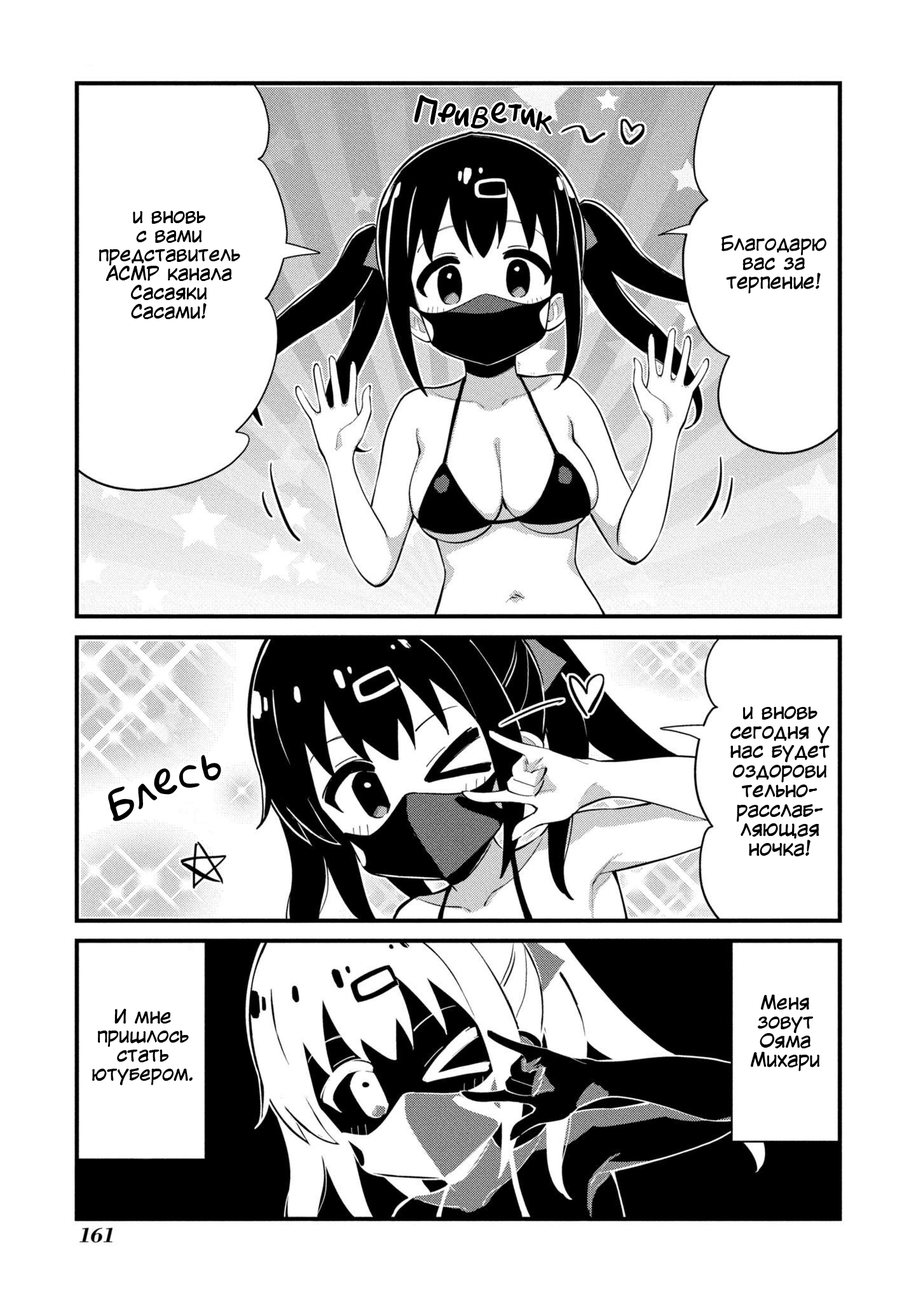
<style>
.page{position:relative;width:916px;height:1302px;background:#ffffff}
.page>*{position:absolute;margin:0}
.t1{font:30.5px "AkbarPlain";color:#000000}
.t2{font:19.1px/19.1px "KuraiVoice2";color:#000000}
.t3{font:19.2px/19.1px "KuraiVoice2";color:#000000}
.t4{font:19.2px "KuraiVoice2";color:#000000}
.t5{font:19.5px/19.5px "KuraiVoice2";color:#000000}
.t6{font:38.1px "AkbarPlain";color:#000000;scale:1.09 1}
</style>
<div class="page">
<p class="t1" style="left:414px;top:95px;width:138px;height:39px;rotate:6deg">Приветик</p>
<p class="t2" style="left:99px;top:210px;width:141px;height:109px;text-align:center">и вновь<br>с вами<br>представитель АСМР канала Сасаяки Сасами!</p>
<p class="t3" style="left:721px;top:235px;width:105px;height:59px;text-align:center"><span class="t4"> </span>Благодарю вас за терпение!</p>
<p class="t5" style="left:730px;top:706px;width:100px;height:150px;text-align:center">и вновь сегодня у нас будет оздоровительно- расслаб-<br>ляющая ночка!</p>
<p class="t6" style="left:108px;top:755px;width:113px;height:66px;rotate:-22deg">Блесь</p>
<p class="t2" style="left:751px;top:994px;width:68px;height:77px;text-align:center">Меня зовут Ояма Михари</p>
<p class="t2" style="left:92px;top:1008px;width:101px;height:77px;text-align:center">И мне  пришлось стать ютубером.</p>
</div>
